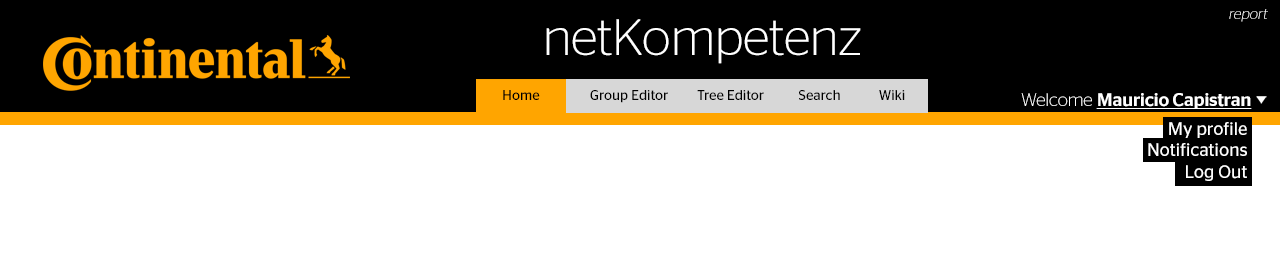
<style>
.page{position:relative;width:1280px;height:253px;background:#ffffff}
.page>*{position:absolute;margin:0}
.t1{font:15px "ContinentalStagSans-Light";color:#ffffff;font-style:italic}
.t2{font:51.1px "ContinentalStagSans-Light";color:#ffffff}
.t3{font:14.1px "ContinentalStagSans-Book";color:#000000}
.t4{font:18.1px "ContinentalStagSans-Medium";color:#ffffff;text-decoration:underline}
.t5{font:18.1px "ContinentalStagSans-Light";color:#ffffff}
.t6{font:18.1px "ContinentalStagSans-Book";color:#ffffff}
</style>
<div class="page">
<p class="t1" style="left:1229px;top:9px;width:39px;height:13px">report</p>
<p class="t2" style="left:546px;top:19px;width:315px;height:45px">netKompetenz</p>
<p class="t3" style="left:503px;top:90px;width:37px;height:10px">Home</p>
<p class="t3" style="left:590px;top:90px;width:78px;height:13px">Group Editor</p>
<p class="t3" style="left:697px;top:90px;width:67px;height:10px">Tree Editor</p>
<p class="t3" style="left:799px;top:90px;width:41px;height:10px">Search</p>
<p class="t3" style="left:879px;top:90px;width:26px;height:10px">Wiki</p>
<p class="t4" style="left:1021px;top:93px;width:231px;height:16px"><span class="t5">Welcome </span>Mauricio Capistran</p>
<p class="t6" style="left:1148px;top:122px;width:99px;height:59px;text-align:right">My profile<br>Notifications<br>Log Out</p>
</div>
